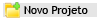
<style>
.page{position:relative;width:100px;height:20px;background:#e5e5e5}
.page>*{position:absolute;margin:0}
.t1{font:11px "TrebuchetMS";color:#000000}
</style>
<div class="page">
<p class="t1" style="left:24px;top:6px;width:64px;height:10px">Novo Projeto</p>
</div>
